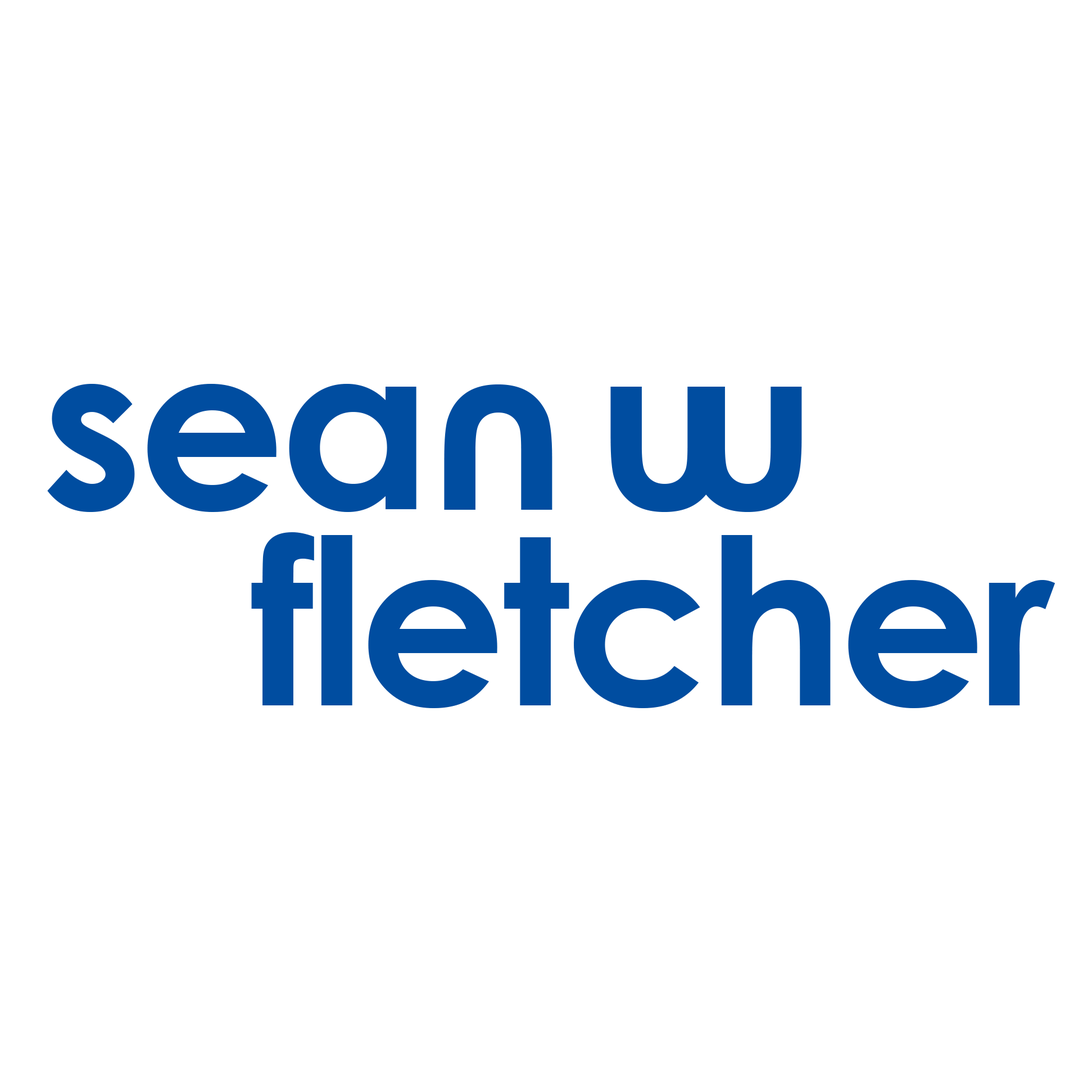
<style>
.page{position:relative;width:1092px;height:1092px;background:#ffffff}
.page>*{position:absolute;margin:0}
.t1{font:230.7px "CenturyGothic-Bold";letter-spacing:-0.025em;color:#004da0}
.t2{font:230.7px "CenturyGothic-Bold";letter-spacing:-0.24em;color:#004da0}
</style>
<div class="page">
<p class="t1" style="left:47px;top:384px;width:369px;height:128px">sea</p>
<p class="t1" style="left:444px;top:384px;width:108px;height:126px">u</p>
<p class="t2" style="left:610px;top:387px;width:192px;height:125px">uu</p>
<p class="t1" style="left:251px;top:532px;width:804px;height:176px">fletcher</p>
</div>
